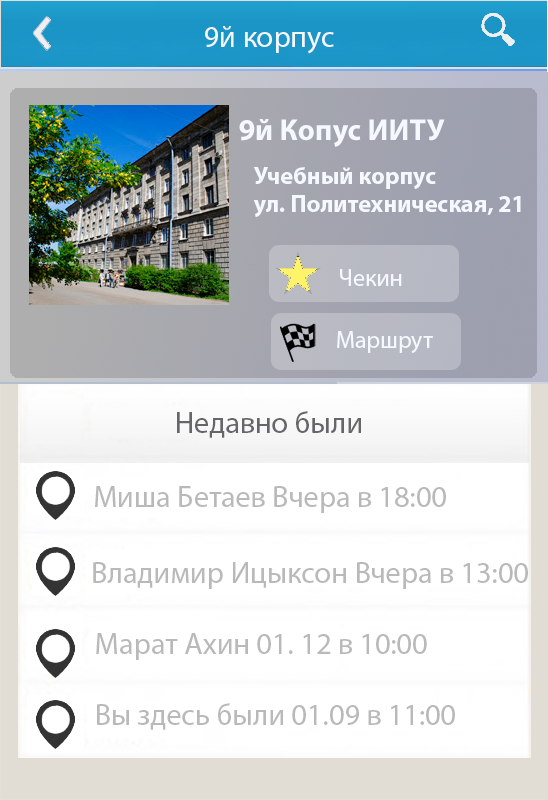
<style>
.page{position:relative;width:548px;height:800px;background:#ffffff}
.page>*{position:absolute;margin:0}
.t1{font:30.3px "MyriadPro-Regular";color:#f5f9ff}
.t2{font:30.3px "MyriadPro-Bold";color:#f5f9ff}
.t3{font:24px "MyriadPro-Bold";color:#f5f9ff}
.t4{font:24px "MyriadPro-Regular";color:#f5f9ff}
.t5{font:30.3px "MyriadPro-Regular";color:#656667}
.t6{font:30.3px "MyriadPro-Regular";color:#b9b9b7}
</style>
<div class="page">
<p class="t1" style="left:205px;top:26px;width:129px;height:28px">9й корпус</p>
<p class="t2" style="left:239px;top:119px;width:206px;height:28px">9й Копус ИИТУ</p>
<p class="t3" style="left:253px;top:167px;width:268px;height:50px">Учебный корпус<br>ул. Политехническая, 21</p>
<p class="t4" style="left:340px;top:269px;width:62px;height:17px">Чекин</p>
<p class="t4" style="left:337px;top:331px;width:96px;height:22px">Маршрут</p>
<p class="t5" style="left:177px;top:411px;width:184px;height:27px">Недавно были</p>
<p class="t6" style="left:95px;top:486px;width:351px;height:27px">Миша Бетаев Вчера в 18:00</p>
<p class="t6" style="left:93px;top:562px;width:435px;height:27px">Владимир Ицыксон Вчера в 13:00</p>
<p class="t6" style="left:96px;top:633px;width:331px;height:27px">Марат Ахин 01. 12 в 10:00</p>
<p class="t6" style="left:97px;top:703px;width:358px;height:27px">Вы здесь были 01.09 в 11:00</p>
</div>
